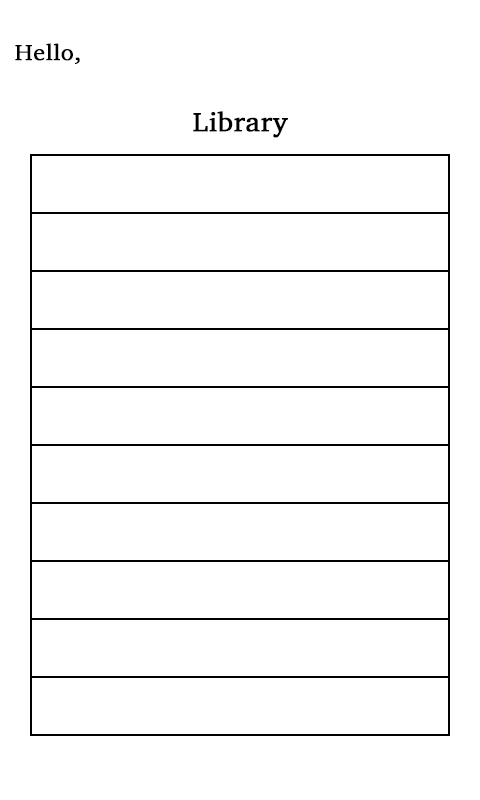
<style>
.page{position:relative;width:480px;height:800px;background:#ffffff}
.page>*{position:absolute;margin:0}
.t1{font:22.5px "Charter";color:#000000;font-weight:bold;scale:1.07 1}
.t2{font:27px "Charter";color:#000000;font-weight:bold;scale:1.07 1}
</style>
<div class="page">
<p class="t1" style="left:15px;top:43px;width:65px;height:21px">Hello,</p>
<p class="t2" style="left:193px;top:111px;width:95px;height:27px">Library</p>
</div>
